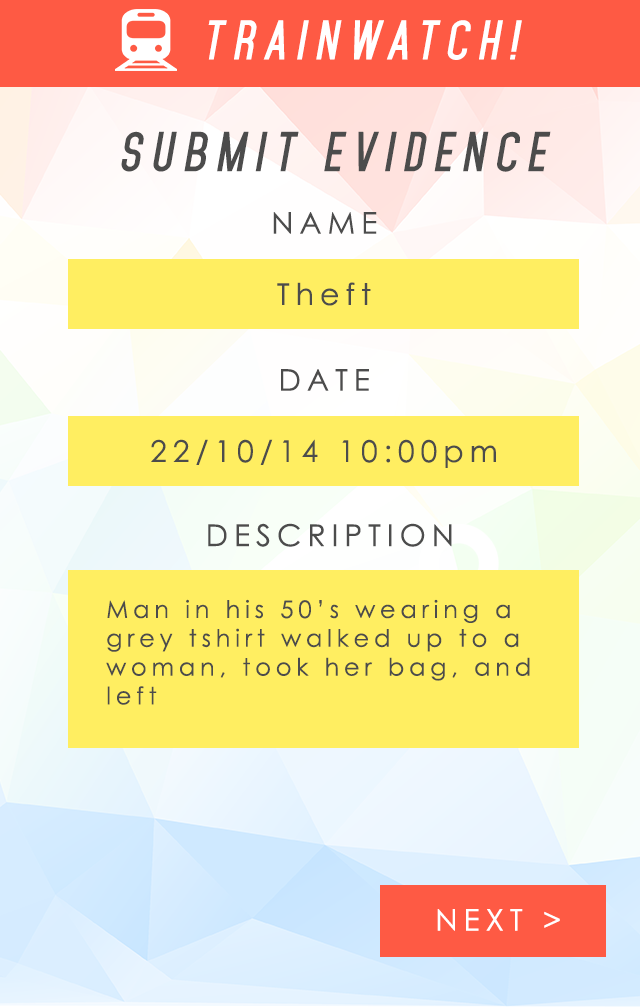
<style>
.page{position:relative;width:640px;height:1007px;background:#ffee61}
.page>*{position:absolute;margin:0}
.t1{font:48px "Mohave-BoldItalic";letter-spacing:0.2em;color:#ffffff;text-transform:uppercase}
.t2{font:48px "Mohave-BoldItalic";letter-spacing:0.2em;color:#4c4c4c;text-transform:uppercase}
.t3{font:30px "CenturyGothic";letter-spacing:0.2em;color:#4c4c4c;text-transform:uppercase}
.t4{font:30px "CenturyGothic";letter-spacing:0.2em;color:#4c4c4c}
.t5{font:24px "CenturyGothic";letter-spacing:0.2em;color:#4c4c4c}
.t6{font:30px "CenturyGothic";letter-spacing:0.2em;color:#ffffff}
</style>
<div class="page">
<p class="t1" style="left:208px;top:20px;width:314px;height:40px">Trainwatch!</p>
<p class="t2" style="left:121px;top:131px;width:430px;height:41px">Submit Evidence</p>
<p class="t3" style="left:273px;top:212px;width:104px;height:22px">Name</p>
<p class="t4" style="left:277px;top:282px;width:94px;height:24px">Theft</p>
<p class="t3" style="left:281px;top:369px;width:88px;height:22px">Date</p>
<p class="t4" style="left:151px;top:439px;width:345px;height:29px">22/10/14 10:00pm</p>
<p class="t3" style="left:208px;top:523px;width:244px;height:24px">Description</p>
<p class="t5" style="left:106px;top:599px;width:424px;height:106px">Man in his 50’s wearing a<br>grey tshirt walked up to a<br>woman, took her bag, and<br>left</p>
<p class="t6" style="left:437px;top:909px;width:123px;height:22px">NEXT &gt;</p>
</div>
